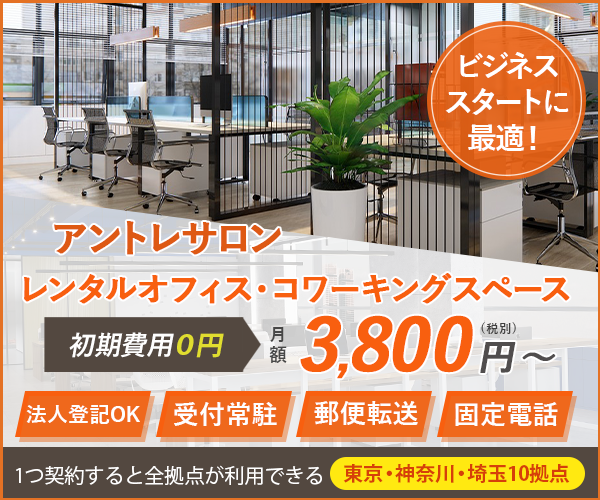
<style>
.page{position:relative;width:600px;height:500px}
.page>*{position:absolute;margin:0}
.t1{font:30px/36px "YuGothic-Bold";letter-spacing:-0.05em;color:#ffffff}
.t2{font:38px "YuGothic-Bold";letter-spacing:-0.05em;color:#de5914;font-weight:bold}
.t3{font:32.6px "YuGothic-Bold";color:#f85f0f;font-weight:bold}
.t4{font:70px "YuGothic-Bold";letter-spacing:-0.05em;color:#f85f0f;font-weight:bold;font-style:italic}
.t5{font:48px "YuGothic-Bold";letter-spacing:-0.05em;color:#f85f0f;font-weight:bold;font-style:italic}
.t6{font:70px "YuGothic-Bold";color:#f85f0f;font-weight:bold;font-style:italic}
.t7{font:70px "YuGothic-Bold";letter-spacing:0.1em;color:#f85f0f;font-weight:bold;font-style:italic}
.t8{font:36px "YuGothic-Bold";letter-spacing:0.1em;color:#504d4d;font-weight:bold;font-style:italic}
.t9{font:36px "YuGothic-Bold";color:#504d4d;font-weight:bold;font-style:italic}
.t10{font:18px/34px "YuGothic-Bold";letter-spacing:0.1em;color:#474747}
.t11{font:12px "YuGothic-Bold";letter-spacing:0.1em;color:#403f3f}
.t12{font:26.8px "YuGothic-Bold";color:#fefefe;font-style:italic}
.t13{font:26.8px "KozGoPr6N-Bold";color:#e0dd2f;font-style:italic}
.t14{font:26.4px "YuGothic-Bold";color:#fefefe}
.t15{font:20.9px "YuGothic-Bold";color:#fefefe}
.t16{font:20px "KozGoPr6N-Regular";color:#ffffff}
.t17{font:20px "KozGoPr6N-Bold";color:#d63f0a}
</style>
<div class="page">
<p class="t1" style="left:445px;top:52px;width:124px;height:99px;text-align:center">ビジネス<br>スタートに<br>最適！</p>
<p class="t2" style="left:54px;top:221px;width:227px;height:34px">アントレサロン</p>
<p class="t3" style="left:24px;top:273px;width:546px;height:31px">レンタルオフィス・コワーキングスペース</p>
<p class="t4" style="left:300px;top:315px;width:256px;height:64px">3<span class="t5">,</span>8<span class="t6">0</span><span class="t7">0</span><span class="t8">円</span><span class="t9">～</span></p>
<p class="t10" style="left:269px;top:327px;width:18px;height:36px;text-align:center">月額</p>
<p class="t11" style="left:481px;top:322px;width:35px;height:12px">(税別)</p>
<p class="t12" style="left:69px;top:332px;width:155px;height:26px">初期費用<span class="t13">０円</span></p>
<p class="t14" style="left:314px;top:401px;width:104px;height:24px">郵便転送</p>
<p class="t15" style="left:26px;top:405px;width:114px;height:19px">法人登記OK</p>
<p class="t14" style="left:174px;top:402px;width:103px;height:24px">受付常駐</p>
<p class="t14" style="left:455px;top:402px;width:103px;height:24px">固定電話</p>
<p class="t16" style="left:16px;top:465px;width:306px;height:20px">1つ契約すると全拠点が利用できる</p>
<p class="t17" style="left:343px;top:464px;width:227px;height:19px">東京・神奈川・埼玉10拠点</p>
</div>
